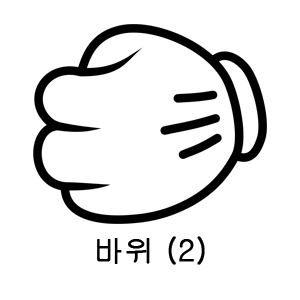
<style>
.page{position:relative;width:300px;height:300px;background:#ffffff}
.page>*{position:absolute;margin:0}
.t1{font:30px "Gulim";color:#000000;font-weight:bold}
</style>
<div class="page">
<p class="t1" style="left:97px;top:236px;width:108px;height:29px">바위 (2)</p>
</div>
